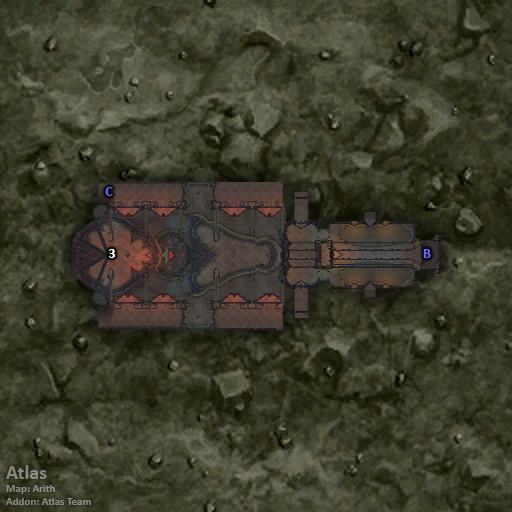
<style>
.page{position:relative;width:512px;height:512px}
.page>*{position:absolute;margin:0}
.t1{font:14px "Calibri-Bold";color:#6666ff}
.t2{font:14px "Calibri-Bold";color:#ffffff}
.t3{font:11px "Calibri-Bold";color:#898980}
.t4{font:20px "Calibri-Bold";color:#898980}
</style>
<div class="page">
<p class="t1" style="left:105px;top:187px;width:8px;height:9px">C</p>
<p class="t2" style="left:109px;top:249px;width:6px;height:9px">3</p>
<p class="t1" style="left:423px;top:249px;width:8px;height:9px">B</p>
<p class="t3" style="left:6px;top:465px;width:85px;height:40px"><span class="t4">Atlas<br></span>Map: Arith<br>Addon: Atlas Team</p>
</div>
